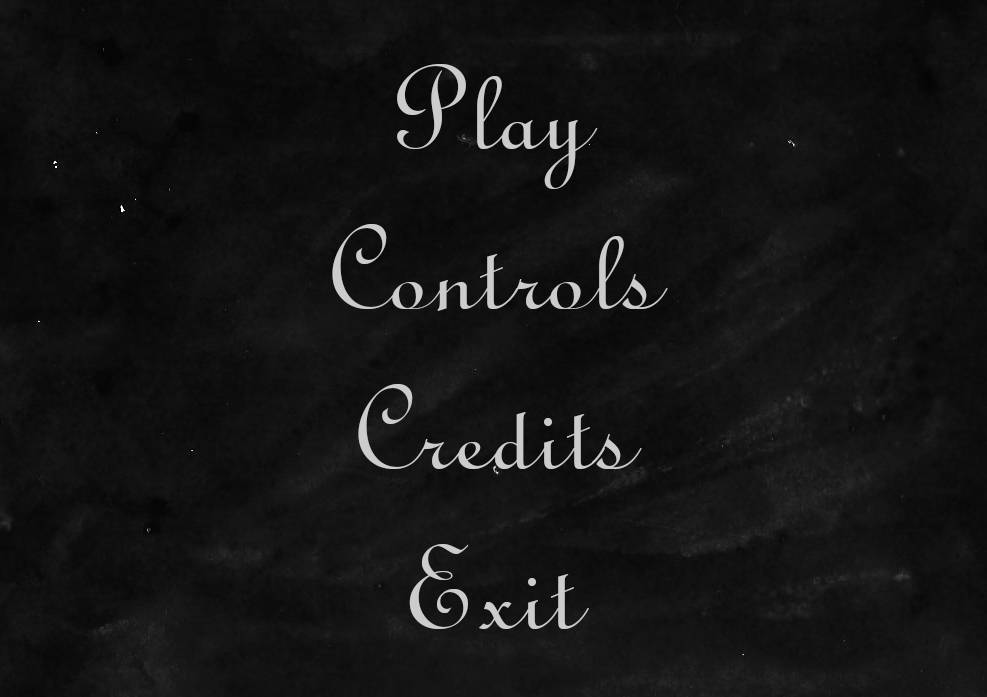
<style>
.page{position:relative;width:987px;height:697px}
.page>*{position:absolute;margin:0}
.t1{font:133.3px "TypoUprightBT-Regular";color:#cccccc}
</style>
<div class="page">
<p class="t1" style="left:332px;top:64px;width:336px;height:565px;text-align:center">Play<br>Controls<br>Credits<br>Exit</p>
</div>
